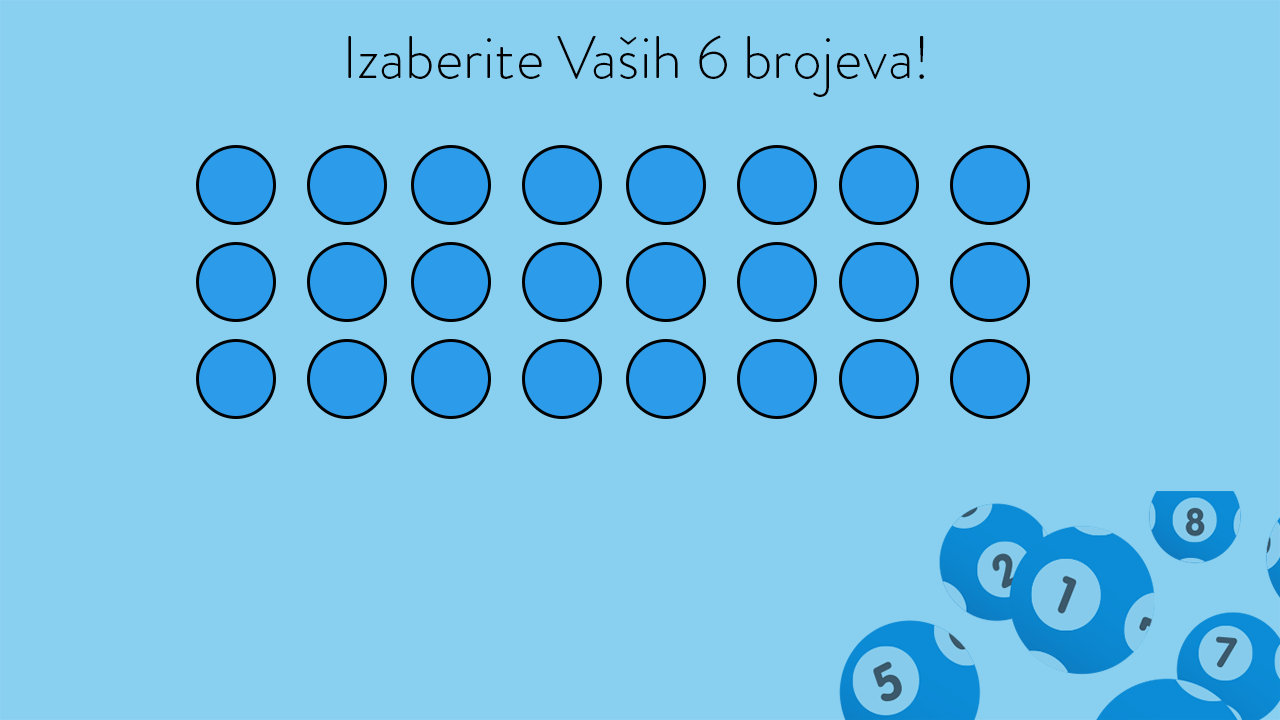
<style>
.page{position:relative;width:1280px;height:720px;background:#89cff0}
.page>*{position:absolute;margin:0}
.t1{font:60px "BrandonGrotesque-Light";letter-spacing:0.007em;color:#000000}
</style>
<div class="page">
<p class="t1" style="left:348px;top:35px;width:576px;height:62px">Izaberite Vaših 6 brojeva!</p>
</div>
